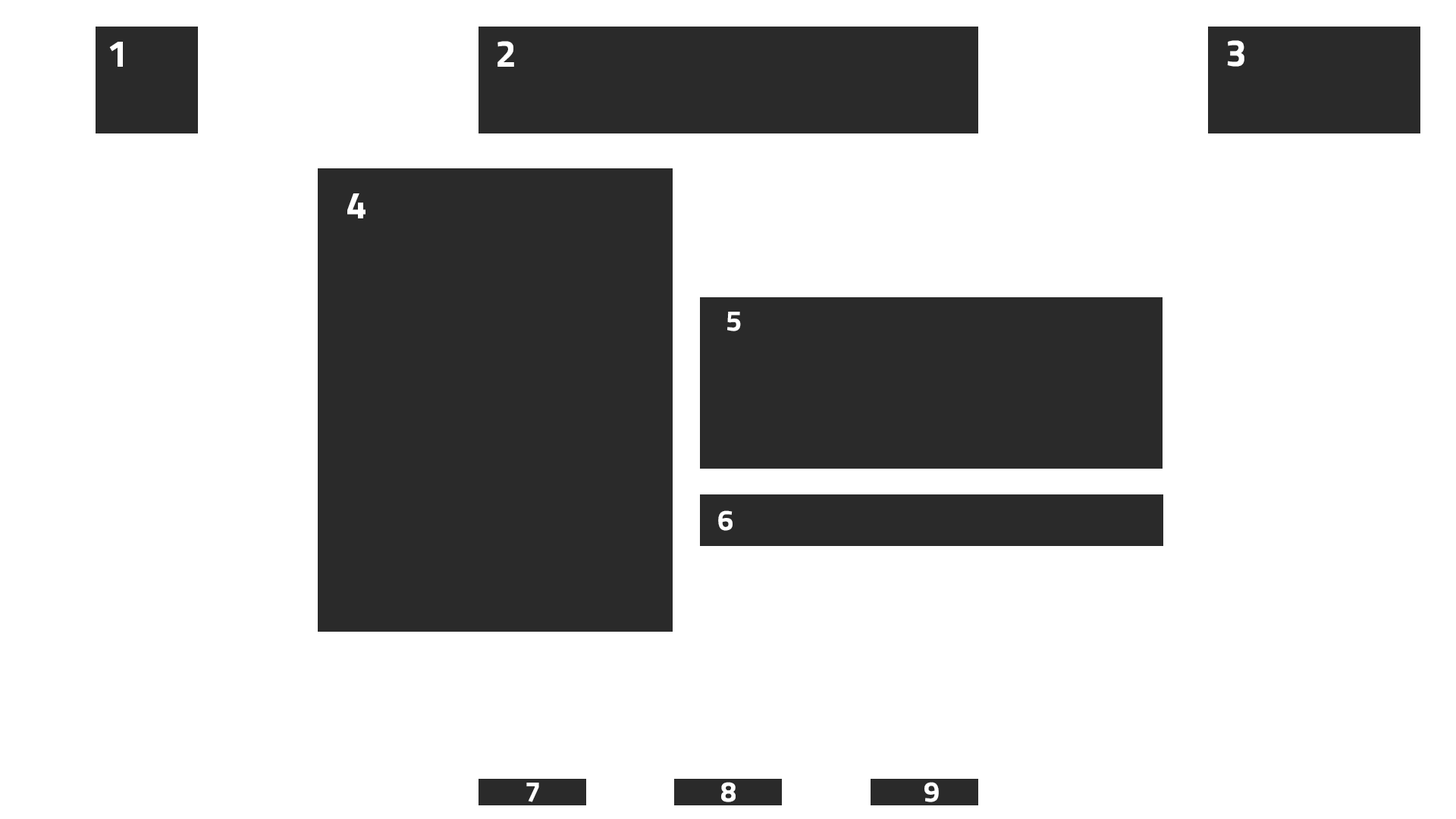
<style>
.page{position:relative;width:1456px;height:819px;background:#ffffff}
.page>*{position:absolute;margin:0}
.t1{font:37.9px "TitilliumWeb-Bold";color:#ffffff}
.t2{font:28.7px "TitilliumWeb-Bold";color:#ffffff}
</style>
<div class="page">
<p class="t1" style="left:109px;top:42px;width:14px;height:25px">1</p>
<p class="t1" style="left:497px;top:41px;width:17px;height:26px">2</p>
<p class="t1" style="left:1227px;top:40px;width:17px;height:27px">3</p>
<p class="t1" style="left:347px;top:193px;width:19px;height:25px">4</p>
<p class="t2" style="left:727px;top:312px;width:14px;height:19px">5</p>
<p class="t2" style="left:718px;top:510px;width:15px;height:21px">6</p>
<p class="t2" style="left:526px;top:783px;width:13px;height:19px">7</p>
<p class="t2" style="left:721px;top:782px;width:15px;height:20px">8</p>
<p class="t2" style="left:924px;top:782px;width:15px;height:20px">9</p>
</div>
